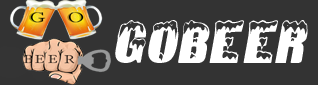
<style>
.page{position:relative;width:318px;height:85px;background:#333333}
.page>*{position:absolute;margin:0}
.t1{font:53.3px "SnowtopCaps";color:#ffffff;font-style:italic;scale:1.04 1}
</style>
<div class="page">
<p class="t1" style="left:115px;top:20px;width:193px;height:43px">GoBeer</p>
</div>
